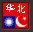
<style>
.page{position:relative;width:33px;height:32px;background:#f20000}
.page>*{position:absolute;margin:0}
.t1{font:10.4px "SimSun";color:#ffffff}
</style>
<div class="page">
<p class="t1" style="left:6px;top:4px;width:19px;height:9px">华北</p>
</div>
